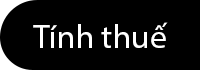
<style>
.page{position:relative;width:200px;height:70px;background:#000000}
.page>*{position:absolute;margin:0}
.t1{font:32.9px "MyriadPro-Regular";color:#fefefe}
</style>
<div class="page">
<p class="t1" style="left:33px;top:22px;width:135px;height:26px">Tính thuế</p>
</div>
